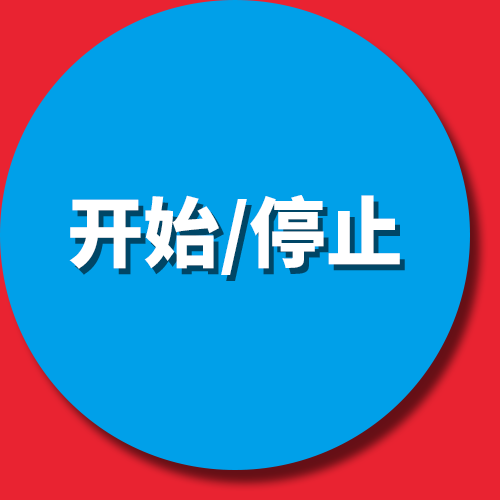
<style>
.page{position:relative;width:500px;height:500px;background:#00a0e9}
.page>*{position:absolute;margin:0}
.t1{font:76.4px "SourceHanSansCN-Heavy";color:#ffffff}
</style>
<div class="page">
<p class="t1" style="left:69px;top:195px;width:331px;height:80px">开始/停止</p>
</div>
